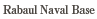
<style>
.page{position:relative;width:97px;height:19px;background:#ffffff}
.page>*{position:absolute;margin:0}
.t1{font:12px "RyuminPro-ExBold";letter-spacing:-0.04em;color:#4c4843;scale:0.9 1}
</style>
<div class="page">
<p class="t1" style="left:3px;top:5px;width:92px;height:10px">Rabaul Naval Base</p>
</div>
